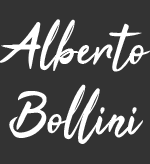
<style>
.page{position:relative;width:150px;height:164px;background:#333333}
.page>*{position:absolute;margin:0}
.t1{font:57.9px "Tahu!";color:#ffffff}
</style>
<div class="page">
<p class="t1" style="left:0px;top:19px;width:150px;height:125px;text-align:center">Alberto<br>Bollini</p>
</div>
